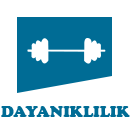
<style>
.page{position:relative;width:130px;height:128px;background:#ffffff}
.page>*{position:absolute;margin:0}
.t1{font:16px "CooperBlack";color:#006c95}
</style>
<div class="page">
<p class="t1" style="left:1px;top:106px;width:129px;height:11px">DAYANIKLILIK</p>
</div>
